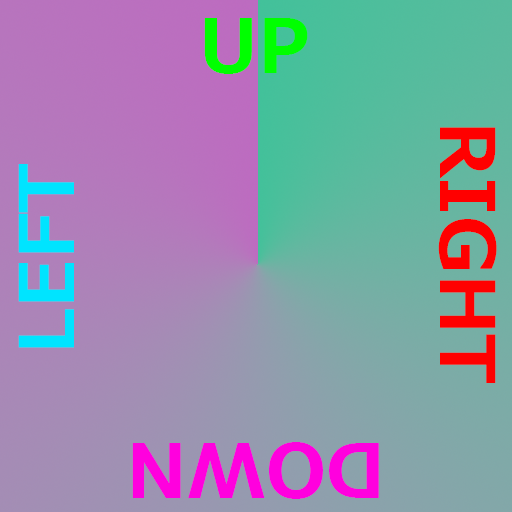
<style>
.page{position:relative;width:512px;height:512px}
.page>*{position:absolute;margin:0}
.t1{font:75px "Meiryo-Bold";color:#00ff00}
.t2{font:75px "Meiryo-Bold";color:#ff0000}
.t3{font:75px "Meiryo-Bold";color:#00e4ff}
.t4{font:75px "Meiryo-Bold";color:#ff00de}
</style>
<div class="page">
<p class="t1" style="left:204px;top:18px;width:104px;height:56px">UP</p>
<p class="t2" style="left:438px;top:127px;width:59px;height:256px;rotate:90deg">RIGHT</p>
<p class="t3" style="left:18px;top:164px;width:56px;height:184px;rotate:-90deg">LEFT</p>
<p class="t4" style="left:132px;top:442px;width:247px;height:57px;rotate:180deg">DOWN</p>
</div>
